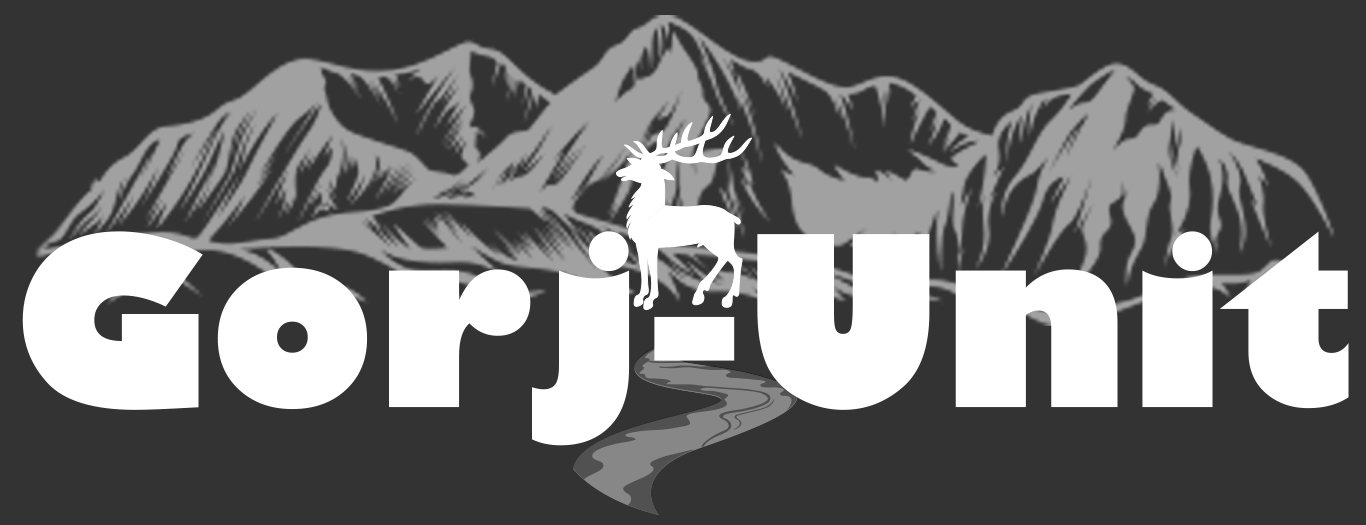
<style>
.page{position:relative;width:1366px;height:525px;background:#333333}
.page>*{position:absolute;margin:0}
.t1{font:231.9px "GillSans-UltraBold";color:#ffffff}
</style>
<div class="page">
<p class="t1" style="left:22px;top:231px;width:1327px;height:215px">Gorj-Unit</p>
</div>
